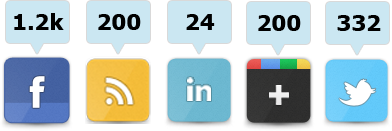
<style>
.page{position:relative;width:392px;height:131px;background:#ffffff}
.page>*{position:absolute;margin:0}
.t1{font:22.1px "Tahoma-Bold";color:#000000;scale:1.06 1}
</style>
<div class="page">
<p class="t1" style="left:14px;top:13px;width:50px;height:17px">1.2k</p>
<p class="t1" style="left:98px;top:14px;width:43px;height:16px">200</p>
<p class="t1" style="left:186px;top:14px;width:29px;height:16px">24</p>
<p class="t1" style="left:258px;top:15px;width:43px;height:16px">200</p>
<p class="t1" style="left:337px;top:15px;width:44px;height:16px">332</p>
</div>
